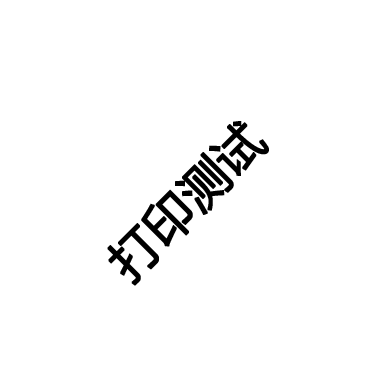
<style>
.page{position:relative;width:386px;height:392px;background:#ffffff}
.page>*{position:absolute;margin:0}
.t1{font:48px "MicrosoftYaHei";color:#000000;font-weight:bold}
</style>
<div class="page">
<p class="t1" style="left:107px;top:121px;width:162px;height:165px;rotate:-45deg">打印测试</p>
</div>
